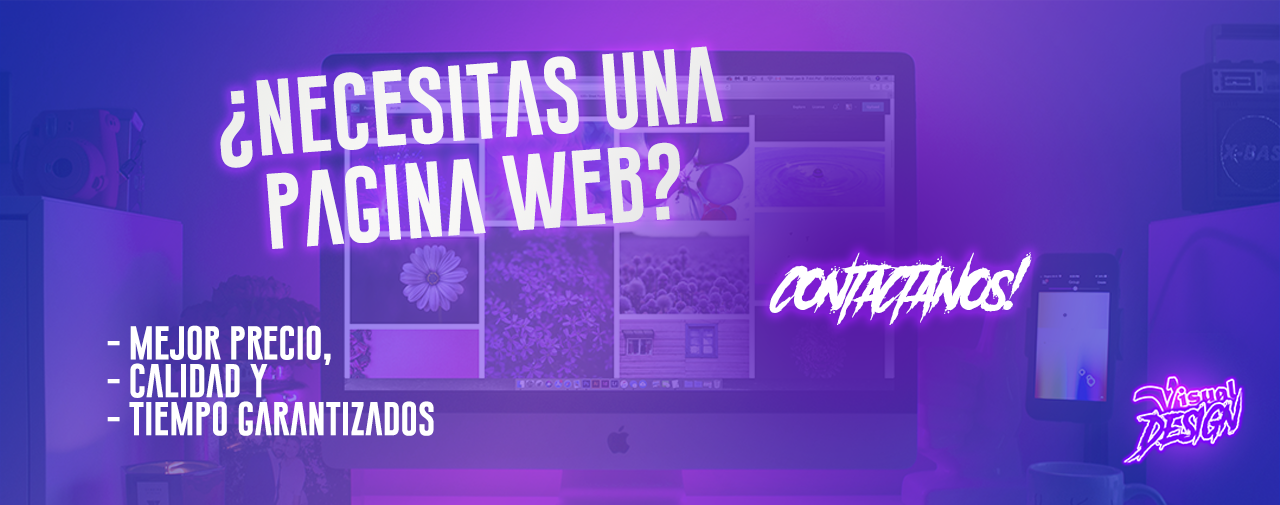
<style>
.page{position:relative;width:1280px;height:505px}
.page>*{position:absolute;margin:0}
.t1{font:78.3px "GoboldExtra1";color:#ffffff}
.t2{font:48.9px "AnotherDangerSlantedDemo";color:#ffffff}
.t3{font:34.5px "GoboldExtra1";color:#ffffff}
</style>
<div class="page">
<p class="t1" style="left:220px;top:46px;width:503px;height:203px;rotate:-4deg">¿Necesitas una pagina web?</p>
<p class="t2" style="left:769px;top:252px;width:263px;height:73px">CONTaCTANOs!</p>
<p class="t3" style="left:107px;top:325px;width:327px;height:111px">- Mejor precio,<br>- calidad y <br>- tiempo garantizados</p>
</div>
